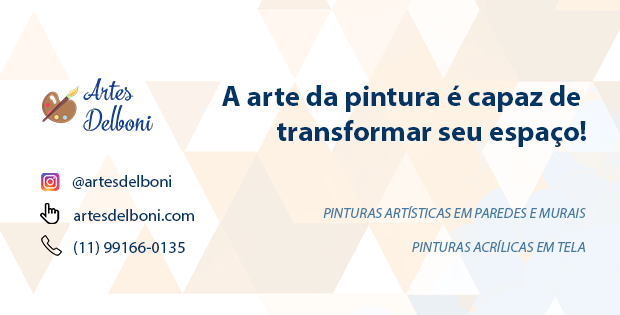
<style>
.page{position:relative;width:620px;height:315px;background:#ffffff}
.page>*{position:absolute;margin:0}
.t1{font:29.2px "MyriadPro-Bold";color:#003566}
.t2{font:16.7px "MyriadPro-Regular";color:#003566}
.t3{font:14.6px/33.3px "MyriadPro-It";color:#427aa1}
</style>
<div class="page">
<p class="t1" style="left:222px;top:85px;width:364px;height:62px;text-align:right">A arte da pintura é capaz de <br>transformar seu espaço!</p>
<p class="t2" style="left:72px;top:175px;width:100px;height:14px">@artesdelboni</p>
<p class="t2" style="left:74px;top:209px;width:120px;height:12px">artesdelboni.com</p>
<p class="t3" style="left:323px;top:206px;width:263px;height:46px;text-align:right">PINTURAS ARTÍSTICAS EM PAREDES E MURAIS<br>PINTURAS ACRÍLICAS EM TELA</p>
<p class="t2" style="left:74px;top:241px;width:111px;height:14px">(11) 99166-0135</p>
</div>
